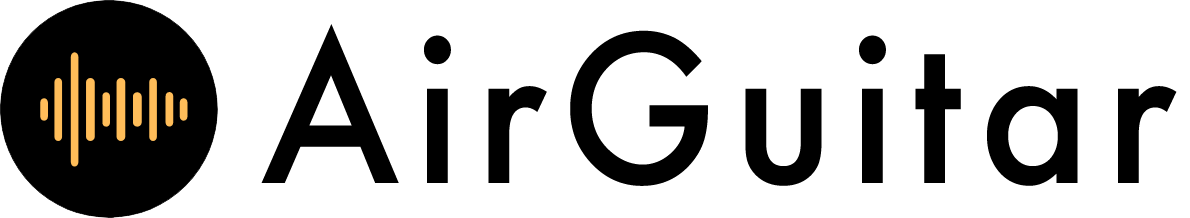
<style>
.page{position:relative;width:1190px;height:218px;background:#ffffff}
.page>*{position:absolute;margin:0}
.t1{font:197.9px "Futura-Medium";letter-spacing:0.08em;color:#000000;scale:0.94 1}
</style>
<div class="page">
<p class="t1" style="left:261px;top:24px;width:916px;height:162px">AirGuitar</p>
</div>
